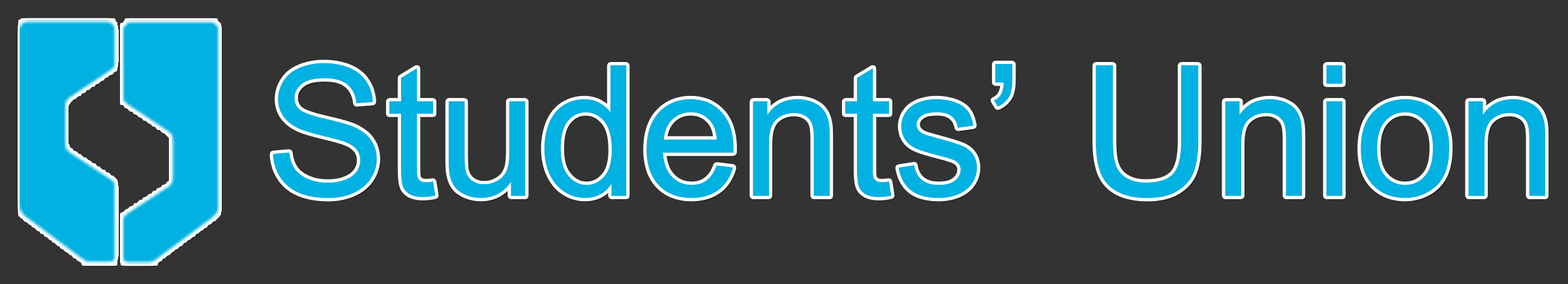
<style>
.page{position:relative;width:1568px;height:284px;background:#333333}
.page>*{position:absolute;margin:0}
.t1{font:182.2px "Kobaniisnotalone";color:#00b1e1}
</style>
<div class="page">
<p class="t1" style="left:273px;top:63px;width:1273px;height:135px">Students’ Union</p>
</div>
